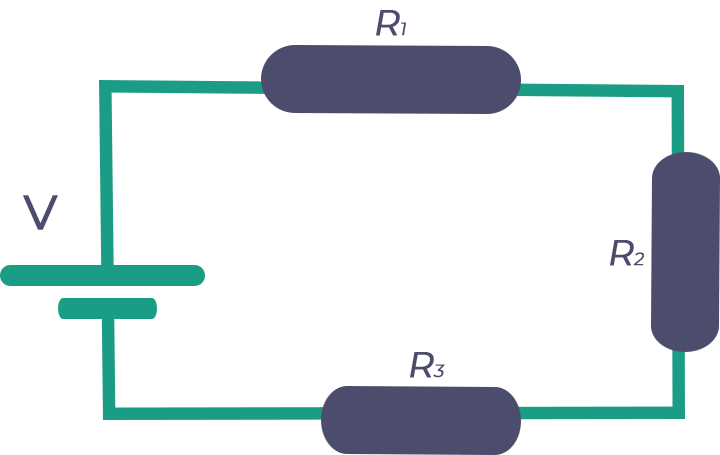
<style>
.page{position:relative;width:720px;height:455px;background:#ffffff}
.page>*{position:absolute;margin:0}
.t1{font:36px "Montserrat-Regular";letter-spacing:0.005em;color:#4c4c6d;font-weight:bold;font-style:italic}
.t2{font:18px "Montserrat-Regular";letter-spacing:0.005em;color:#4c4c6d;font-weight:bold;font-style:italic}
.t3{font:48px "Montserrat-Regular";letter-spacing:0.005em;color:#4c4c6d;font-weight:bold}
</style>
<div class="page">
<p class="t1" style="left:376px;top:10px;width:30px;height:26px">R<span class="t2">1</span></p>
<p class="t3" style="left:23px;top:195px;width:35px;height:35px">V</p>
<p class="t1" style="left:610px;top:240px;width:34px;height:26px">R<span class="t2">2</span></p>
<p class="t1" style="left:410px;top:352px;width:35px;height:26px">R<span class="t2">3</span></p>
</div>
